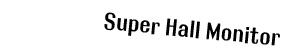
<style>
.page{position:relative;width:283px;height:56px;background:#ffffff}
.page>*{position:absolute;margin:0}
.t1{font:24px "RolloutPlain";color:#000000}
</style>
<div class="page">
<p class="t1" style="left:104px;top:12px;width:176px;height:34px;rotate:6deg">Super Hall Monitor</p>
</div>
